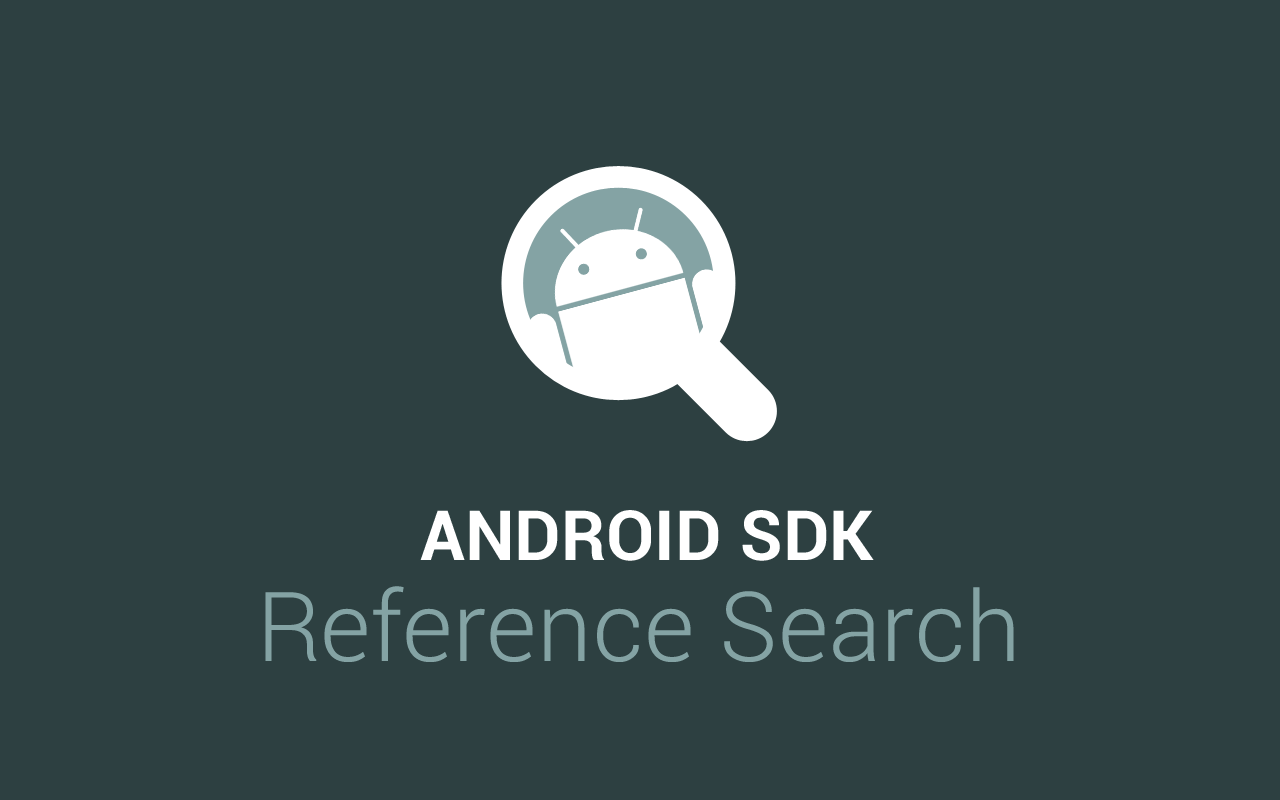
<style>
.page{position:relative;width:1280px;height:800px;background:#2d4041}
.page>*{position:absolute;margin:0}
.t1{font:100.6px/100.1px "Roboto-Light";color:#84a3a4}
.t2{font:72px/100.1px "Roboto-Bold";color:#ffffff}
</style>
<div class="page">
<p class="t1" style="left:265px;top:510px;width:749px;height:152px;text-align:center"><span class="t2">ANDROID SDK<br></span>Reference Search</p>
</div>
